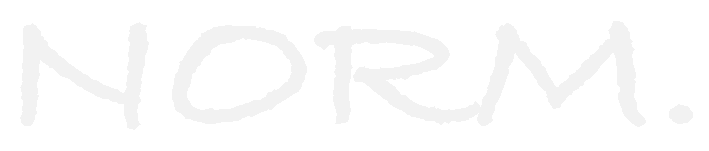
<style>
.page{position:relative;width:709px;height:151px;background:#ffffff}
.page>*{position:absolute;margin:0}
.t1{font:191.8px "BradleyHandITCTTBold";color:#f2f2f2;scale:1.08 1}
</style>
<div class="page">
<p class="t1" style="left:20px;top:21px;width:673px;height:109px">NORM.</p>
</div>
